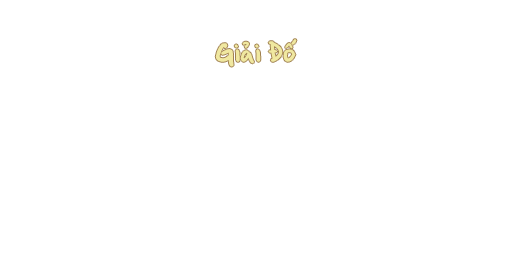
<style>
.page{position:relative;width:512px;height:256px;background:#ffffff}
.page>*{position:absolute;margin:0}
.t1{font:29.3px "BrianneTod";color:#f0e8a0}
</style>
<div class="page">
<p class="t1" style="left:215px;top:39px;width:82px;height:28px">Giải Đố</p>
</div>
